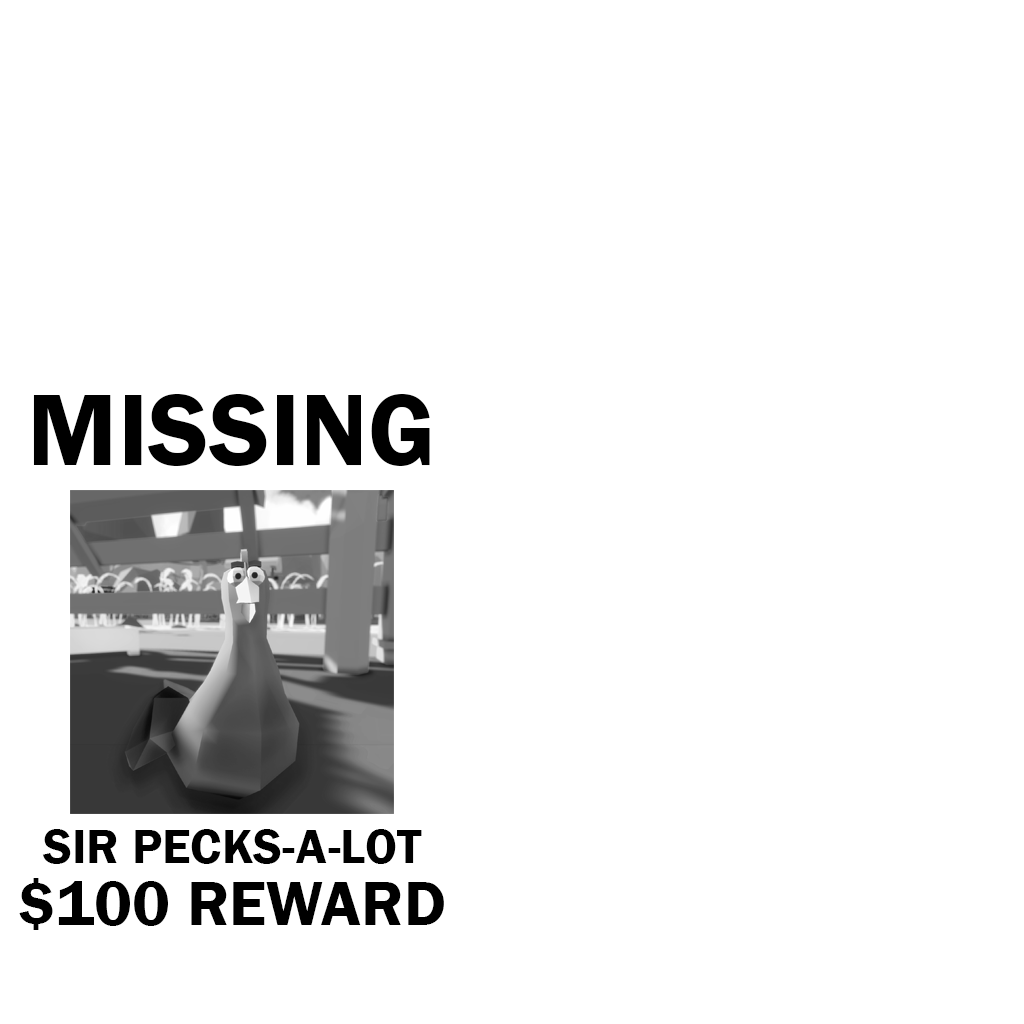
<style>
.page{position:relative;width:1024px;height:1024px;background:#ffffff}
.page>*{position:absolute;margin:0}
.t1{font:105px "FranklinGothic-Demi";color:#000000}
.t2{font:50px "FranklinGothic-Demi";color:#000000}
.t3{font:65px "FranklinGothic-Demi";color:#000000}
</style>
<div class="page">
<p class="t1" style="left:33px;top:394px;width:397px;height:72px">MISSING</p>
<p class="t2" style="left:42px;top:829px;width:380px;height:35px">SIR PECKS-A-LOT</p>
<p class="t3" style="left:19px;top:878px;width:425px;height:52px">$100 REWARD</p>
</div>
